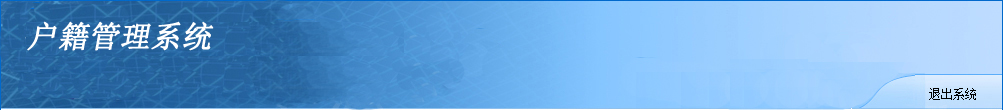
<style>
.page{position:relative;width:1003px;height:110px}
.page>*{position:absolute;margin:0}
.t1{font:30px "SimSun";color:#ffffff;font-weight:bold;font-style:italic}
</style>
<div class="page">
<p class="t1" style="left:27px;top:21px;width:187px;height:30px">户籍管理系统</p>
</div>
